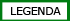
<style>
.page{position:relative;width:70px;height:21px;background:#ffffff}
.page>*{position:absolute;margin:0}
.t1{font:10.5px "Verdana";color:#000000}
</style>
<div class="page">
<p class="t1" style="left:11px;top:7px;width:50px;height:8px">LEGENDA</p>
</div>
